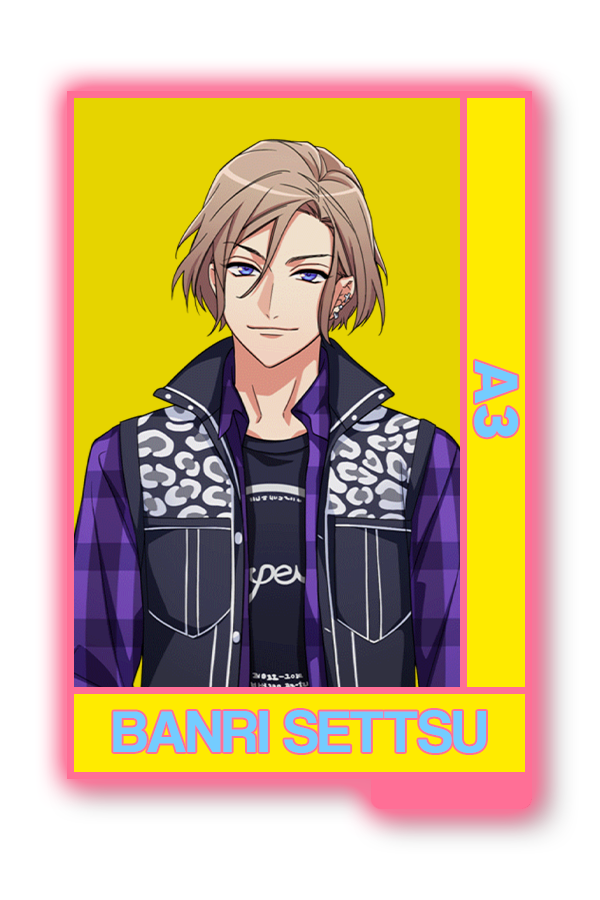
<style>
.page{position:relative;width:600px;height:900px;background:#ffffff}
.page>*{position:absolute;margin:0}
.t1{font:60.5px "MADETOMMY-Bold";color:#74ccff}
.t2{font:60.9px "CoolveticaRg-Regular";color:#74ccff}
</style>
<div class="page">
<p class="t1" style="left:474px;top:360px;width:44px;height:78px;rotate:90deg">A3</p>
<p class="t2" style="left:113px;top:710px;width:373px;height:43px">BANRI SETTSU</p>
</div>
